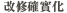
<style>
.page{position:relative;width:67px;height:13px;background:#ffffff}
.page>*{position:absolute;margin:0}
.t1{font:12px "RyuminPr6N-ExBold";color:#4b4742}
</style>
<div class="page">
<p class="t1" style="left:4px;top:0px;width:60px;height:13px">改修確實化</p>
</div>
